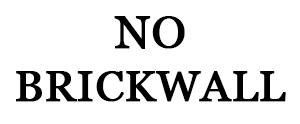
<style>
.page{position:relative;width:300px;height:124px;background:#ffffff}
.page>*{position:absolute;margin:0}
.t1{font:44px "Vani";color:#000000;text-transform:uppercase;font-weight:bold}
.t2{font:46px "Vani";color:#000000;text-transform:uppercase;font-weight:bold}
</style>
<div class="page">
<p class="t1" style="left:16px;top:16px;width:270px;height:86px;text-align:center"><span class="t2">No         </span>brickwall</p>
</div>
